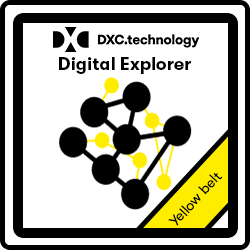
<style>
.page{position:relative;width:250px;height:250px;background:#ffffff}
.page>*{position:absolute;margin:0}
.t1{font:18px "GTWalsheimPro-Bold";color:#000000}
.t2{font:14.6px "GTWalsheimPro-Regular";color:#010101}
</style>
<div class="page">
<p class="t1" style="left:59px;top:57px;width:132px;height:17px">Digital Explorer</p>
<p class="t2" style="left:168px;top:172px;width:55px;height:54px;rotate:-48deg">Yellow belt</p>
</div>
